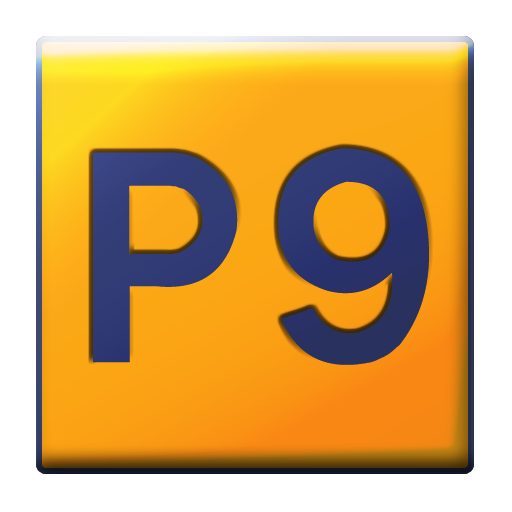
<style>
.page{position:relative;width:512px;height:512px;background:#ffffff}
.page>*{position:absolute;margin:0}
.t1{font:280px "Transport-Regular";color:#333d76}
</style>
<div class="page">
<p class="t1" style="left:93px;top:148px;width:336px;height:217px">P9</p>
</div>
